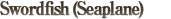
<style>
.page{position:relative;width:171px;height:19px;background:#ffffff}
.page>*{position:absolute;margin:0}
.t1{font:18px "RyuminPro-ExBold";letter-spacing:-0.08em;color:#4a3f32;font-weight:bold;scale:0.9 1}
</style>
<div class="page">
<p class="t1" style="left:0px;top:1px;width:144px;height:18px">Swordfish (Seaplane)</p>
</div>
